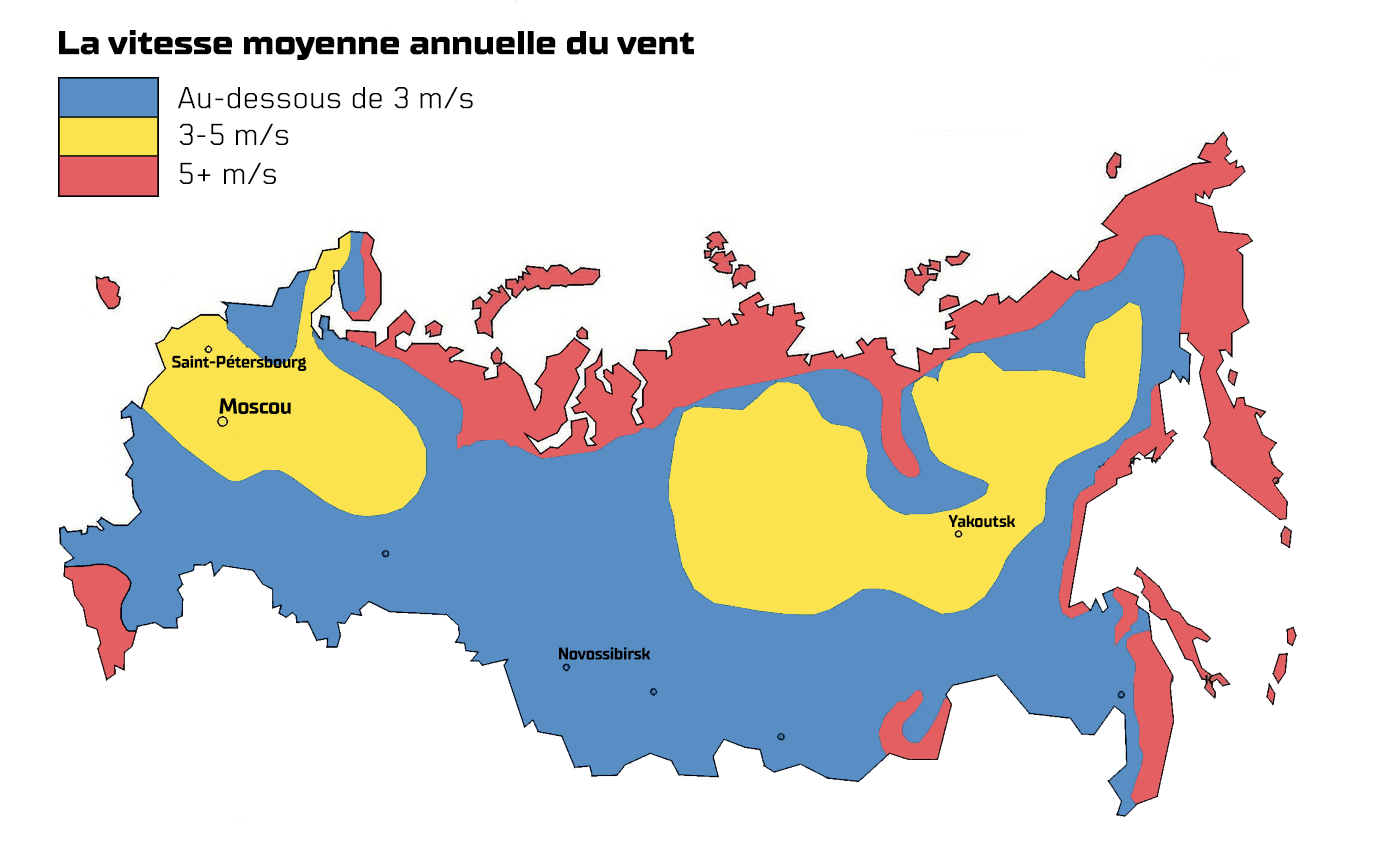
<style>
.page{position:relative;width:1379px;height:852px;background:#ffffff}
.page>*{position:absolute;margin:0}
.t1{font:33.3px "TTSupermolotNeue-ExpXBold";letter-spacing:-0.02em;color:#000000}
.t2{font:35.4px "BlenderPro-Book";color:#000000}
.t3{font:17px "TTSupermolotNeue-Bold";letter-spacing:-0.02em;color:#000000}
.t4{font:22px "TTSupermolotNeue-Bold";letter-spacing:-0.02em;color:#000000}
</style>
<div class="page">
<p class="t1" style="left:59px;top:30px;width:635px;height:30px">La vitesse moyenne annuelle du vent</p>
<p class="t2" style="left:178px;top:87px;width:295px;height:22px">Au-dessous de 3 m/s</p>
<p class="t2" style="left:179px;top:123px;width:110px;height:22px">3-5 m/s</p>
<p class="t2" style="left:179px;top:162px;width:97px;height:22px">5+ m/s</p>
<p class="t3" style="left:172px;top:355px;width:135px;height:16px">Saint-Pétersbourg</p>
<p class="t4" style="left:219px;top:398px;width:72px;height:16px">Moscou</p>
<p class="t3" style="left:948px;top:515px;width:67px;height:13px">Yakoutsk</p>
<p class="t3" style="left:559px;top:647px;width:91px;height:13px">Novossibirsk</p>
</div>
